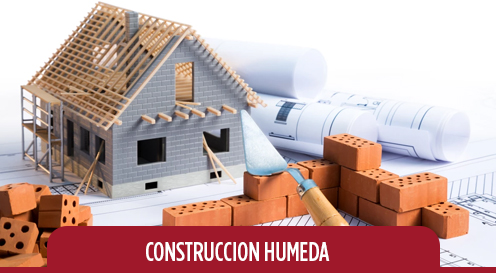
<style>
.page{position:relative;width:496px;height:273px}
.page>*{position:absolute;margin:0}
.t1{font:27px "GothamCond-Medium";color:#ffffff}
</style>
<div class="page">
<p class="t1" style="left:146px;top:242px;width:184px;height:19px">CONSTRUCCION HUMEDA</p>
</div>
